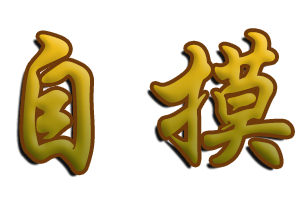
<style>
.page{position:relative;width:300px;height:200px;background:#ffffff}
.page>*{position:absolute;margin:0}
.t1{font:166.7px "STXingkai"}
</style>
<div class="page">
<p class="t1" style="left:23px;top:32px;width:268px;height:140px">自摸</p>
</div>
